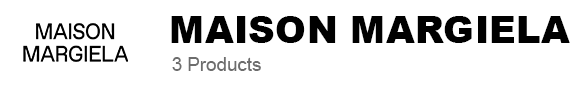
<style>
.page{position:relative;width:587px;height:95px;background:#ffffff}
.page>*{position:absolute;margin:0}
.t1{font:37.5px "Arial-Black";color:#000000}
.t2{font:18.7px "ArialMT";color:#6d6d6d}
</style>
<div class="page">
<p class="t1" style="left:171px;top:16px;width:399px;height:27px">MAISON MARGIELA</p>
<p class="t2" style="left:172px;top:57px;width:89px;height:14px">3 Products</p>
</div>
